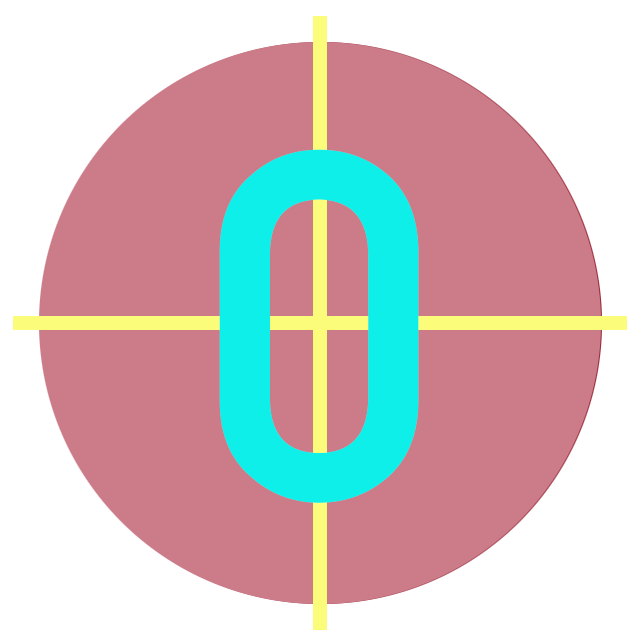
<style>
.page{position:relative;width:643px;height:643px;background:#cc7b89}
.page>*{position:absolute;margin:0}
.t1{font:365.9px "DINAlternate-Bold";color:#0eefea}
</style>
<div class="page">
<p class="t1" style="left:219px;top:149px;width:200px;height:354px">0</p>
</div>
